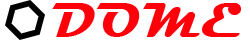
<style>
.page{position:relative;width:250px;height:40px;background:#ffffff}
.page>*{position:absolute;margin:0}
.t1{font:50px "Magneto-Bold";letter-spacing:0.034em;color:#ff000b}
</style>
<div class="page">
<p class="t1" style="left:52px;top:3px;width:189px;height:34px">DOME</p>
</div>
